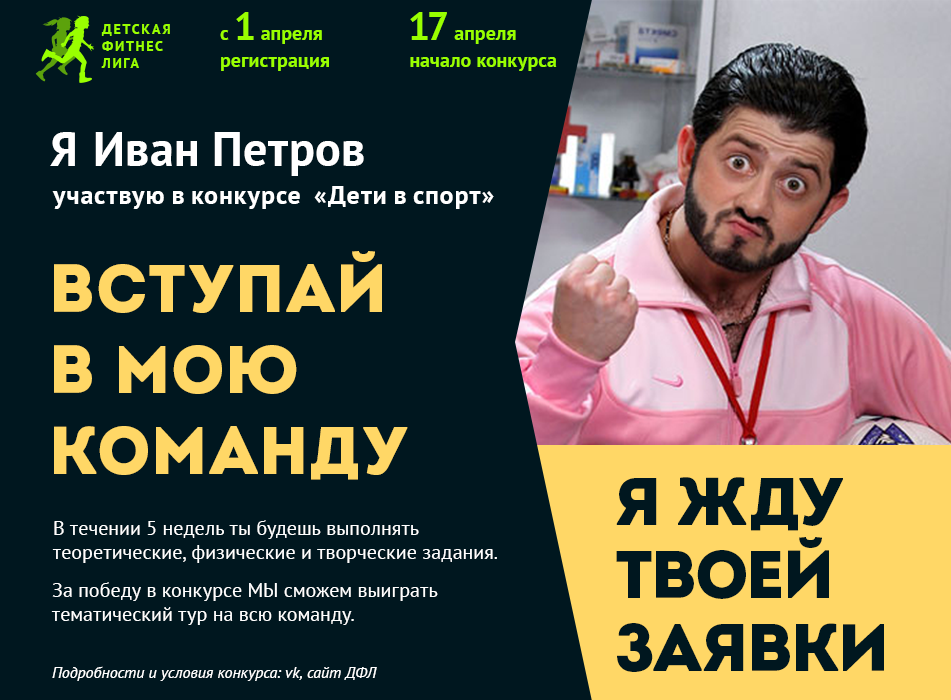
<style>
.page{position:relative;width:951px;height:700px;background:#00171f}
.page>*{position:absolute;margin:0}
.t1{font:20px "PTSans-Bold";color:#99ff00}
.t2{font:38.7px "PTSans-Bold";color:#99ff00}
.t3{font:14.4px "PTSans-Bold";letter-spacing:0.1em;color:#99ff00;text-transform:uppercase}
.t4{font:48px "PTSans-Bold";color:#ffffff;text-transform:uppercase}
.t5{font:48px "PTSans-Bold";color:#ffffff}
.t6{font:26px "PTSans-Bold";color:#ffffff}
.t7{font:67.4px "Intro-Black";letter-spacing:0.025em;color:#ffd766;text-transform:uppercase}
.t8{font:67.1px/73px "Intro-Black";color:#00171f;text-transform:uppercase}
.t9{font:20px "PTSans-Regular";color:#ffffff}
.t10{font:16px "PTSans-Italic";color:#ffffff}
</style>
<div class="page">
<p class="t1" style="left:220px;top:12px;width:102px;height:32px">c <span class="t2">1</span> апреля</p>
<p class="t1" style="left:410px;top:12px;width:106px;height:32px"><span class="t2">17</span> апреля</p>
<p class="t3" style="left:101px;top:24px;width:69px;height:44px">детская<br>фитнес<br>лига</p>
<p class="t1" style="left:221px;top:57px;width:108px;height:14px">регистрация</p>
<p class="t1" style="left:410px;top:57px;width:147px;height:14px">начало конкурса</p>
<p class="t4" style="left:50px;top:132px;width:25px;height:34px">Я</p>
<p class="t5" style="left:95px;top:132px;width:269px;height:44px">Иван Петров</p>
<p class="t6" style="left:52px;top:191px;width:248px;height:18px">участвую в конкурсе</p>
<p class="t6" style="left:314px;top:186px;width:180px;height:23px">«Дети в спорт»</p>
<p class="t7" style="left:54px;top:251px;width:354px;height:229px">Вступай<br>в мою<br>команду</p>
<p class="t8" style="left:616px;top:477px;width:268px;height:195px">Я жду<br>твоей<br>заявки</p>
<p class="t9" style="left:52px;top:520px;width:445px;height:43px">В течении 5 недель ты будешь выполнять теоретические, физические и творческие задания.</p>
<p class="t9" style="left:51px;top:582px;width:387px;height:43px">За победу в конкурсе МЫ сможем выиграть тематический тур на всю команду.</p>
<p class="t10" style="left:52px;top:666px;width:325px;height:15px">Подробности и условия конкурса: vk, сайт ДФЛ</p>
</div>
